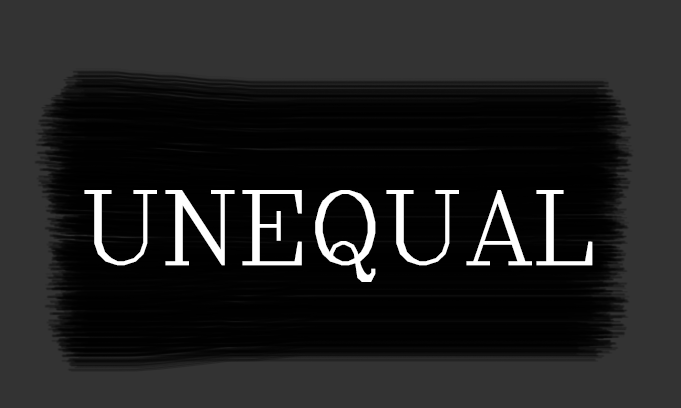
<style>
.page{position:relative;width:681px;height:408px;background:#333333}
.page>*{position:absolute;margin:0}
.t1{font:100px "Complex_IV25";letter-spacing:-0.05em;color:#ffffff}
</style>
<div class="page">
<p class="t1" style="left:84px;top:190px;width:509px;height:92px">UNEQUAL</p>
</div>
